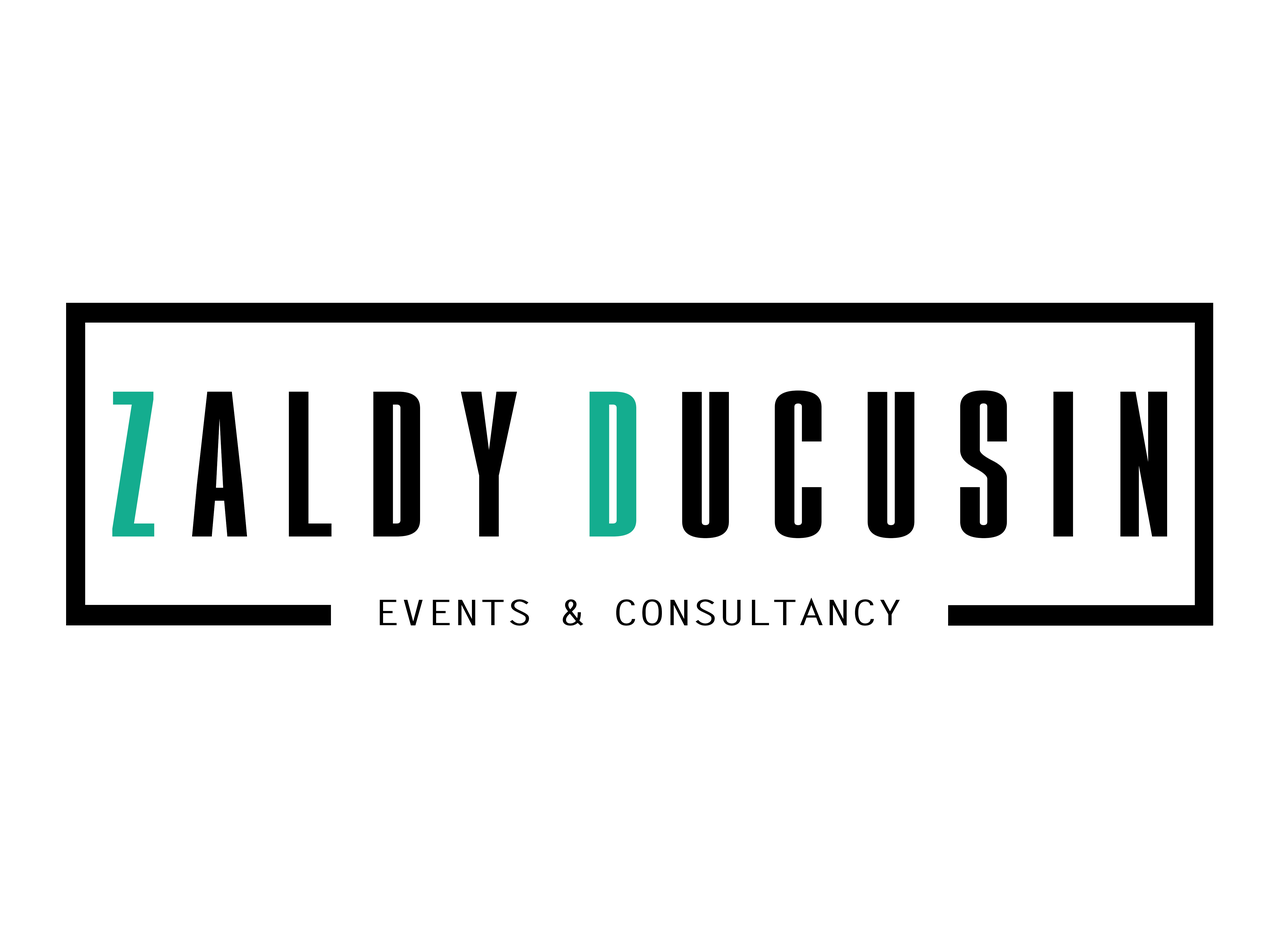
<style>
.page{position:relative;width:1280px;height:931px;background:#ffffff}
.page>*{position:absolute;margin:0}
.t1{font:167.6px "GoboldHighBold";color:#000000;scale:1.25 1}
.t2{font:167.6px "GoboldHighBold";color:#14ad8f;scale:1.25 1}
.t3{font:35.4px "LetterGothicStd-Bold";color:#000000;scale:1.25 1}
</style>
<div class="page">
<p class="t1" style="left:112px;top:390px;width:1056px;height:148px"><span class="t2">z </span>a l d y  <span class="t2">d </span>u c u s i n</p>
<p class="t3" style="left:380px;top:598px;width:520px;height:28px">EVENTS &amp; CONSULTANCY</p>
</div>
